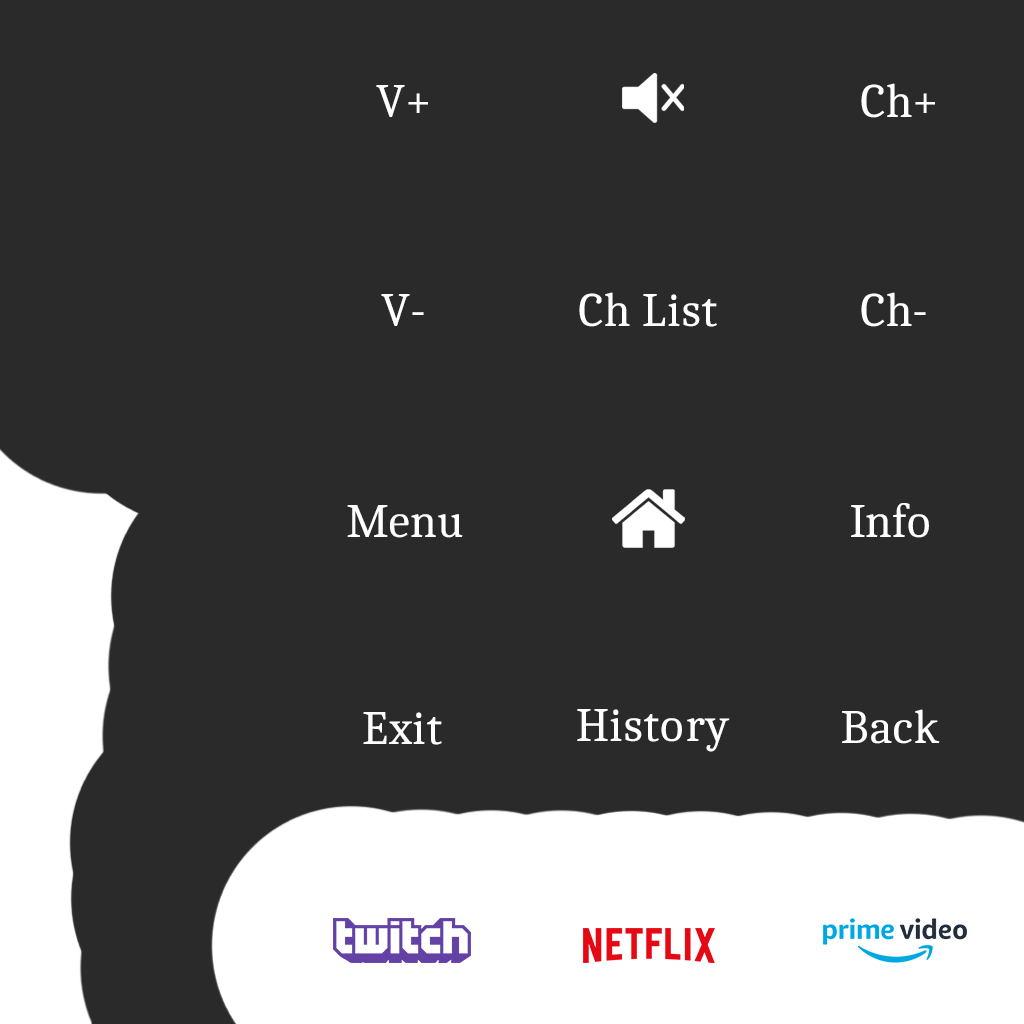
<style>
.page{position:relative;width:1024px;height:1024px;background:#2a2a2a}
.page>*{position:absolute;margin:0}
.t1{font:48px "Caladea-Regular";color:#ffffff}
</style>
<div class="page">
<p class="t1" style="left:376px;top:85px;width:52px;height:32px">V+</p>
<p class="t1" style="left:861px;top:83px;width:74px;height:35px">Ch+</p>
<p class="t1" style="left:381px;top:294px;width:43px;height:32px">V-</p>
<p class="t1" style="left:579px;top:292px;width:138px;height:35px">Ch List</p>
<p class="t1" style="left:861px;top:292px;width:65px;height:35px">Ch-</p>
<p class="t1" style="left:347px;top:505px;width:116px;height:33px">Menu</p>
<p class="t1" style="left:851px;top:503px;width:78px;height:35px">Info</p>
<p class="t1" style="left:363px;top:712px;width:79px;height:33px">Exit</p>
<p class="t1" style="left:577px;top:709px;width:153px;height:43px">History</p>
<p class="t1" style="left:842px;top:709px;width:98px;height:35px">Back</p>
</div>
